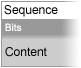
<style>
.page{position:relative;width:81px;height:68px;background:#ffffff}
.page>*{position:absolute;margin:0}
.t1{font:12px "ArialMT";color:#000000}
.t2{font:10px "ArialMT";color:#ffffff}
</style>
<div class="page">
<p class="t1" style="left:4px;top:5px;width:54px;height:12px">Sequence</p>
<p class="t2" style="left:5px;top:23px;width:17px;height:8px">Bits</p>
<p class="t1" style="left:5px;top:47px;width:42px;height:10px">Content</p>
</div>
